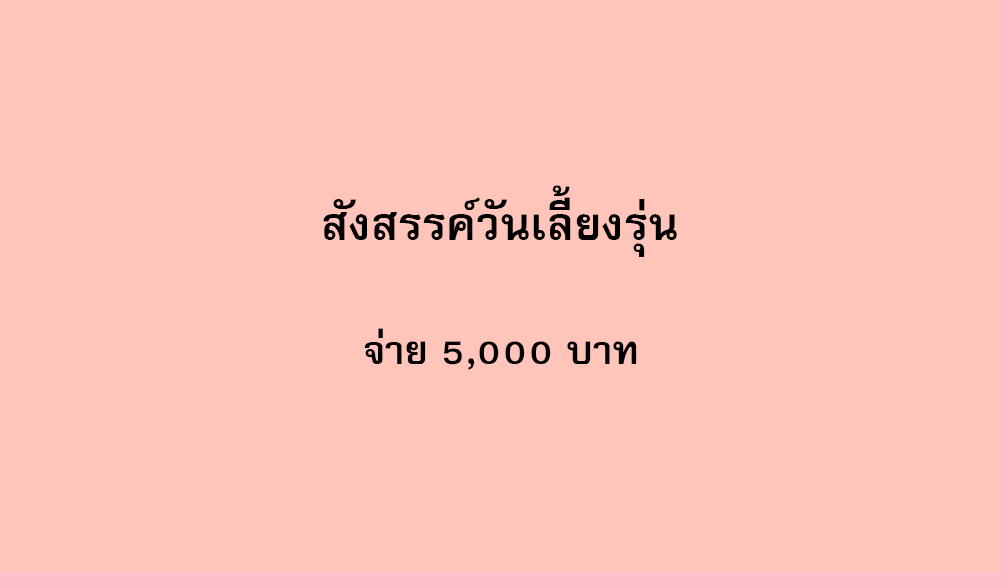
<style>
.page{position:relative;width:1000px;height:572px;background:#ffc4ba}
.page>*{position:absolute;margin:0}
.t1{font:64px "FreesiaUPCBold";color:#000000}
.t2{font:56px "FreesiaUPCBold";color:#000000}
</style>
<div class="page">
<p class="t1" style="left:323px;top:185px;width:354px;height:72px">สังสรรค์วันเลี้ยงรุ่น</p>
<p class="t2" style="left:364px;top:328px;width:273px;height:42px">จ่าย 5,000 บาท</p>
</div>
